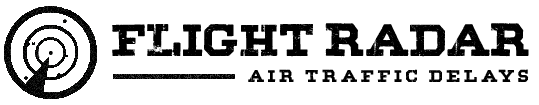
<style>
.page{position:relative;width:539px;height:105px;background:#ffffff}
.page>*{position:absolute;margin:0}
.t1{font:48px "BLACK";color:#000000}
.t2{font:18px "BLACK";letter-spacing:0.2em;color:#000000}
</style>
<div class="page">
<p class="t1" style="left:112px;top:23px;width:417px;height:34px">FLIGHT RADAR</p>
<p class="t2" style="left:248px;top:69px;width:281px;height:13px">Air Traffic Delays</p>
</div>
